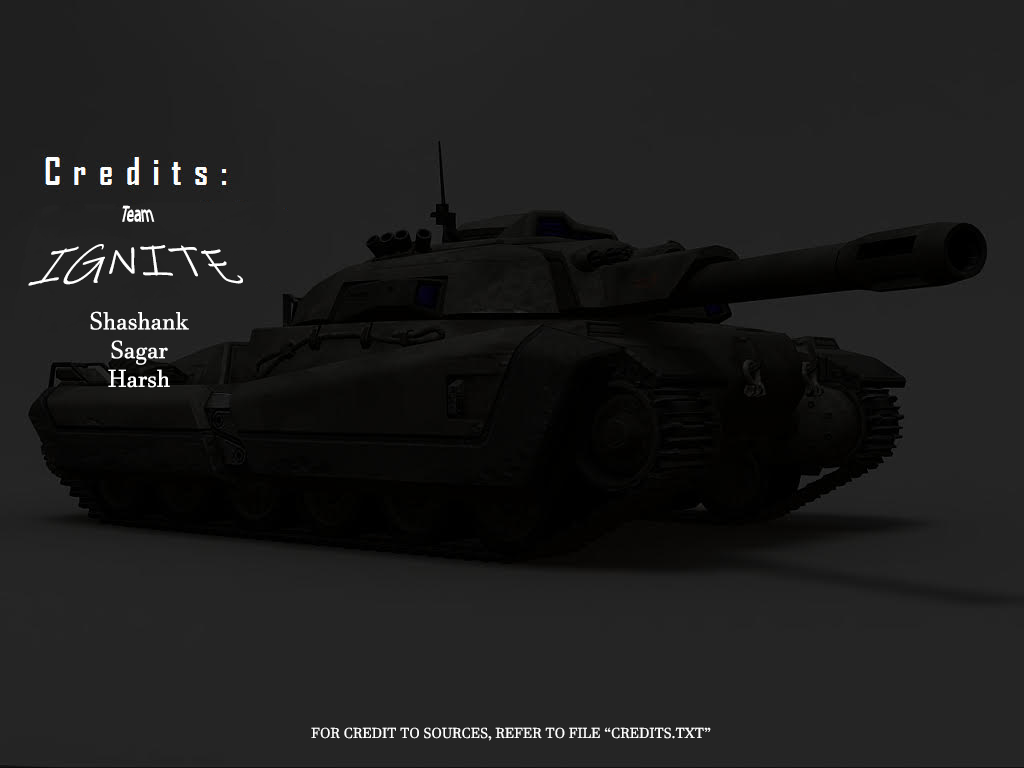
<style>
.page{position:relative;width:1024px;height:768px;background:#252525}
.page>*{position:absolute;margin:0}
.t1{font:57.9px "InkFree";color:#ffffff;scale:0.77 1}
.t2{font:29px "Tahoma";color:#ffffff;scale:0.77 1}
.t3{font:24px "JavaneseText";color:#ffffff}
.t4{font:14px "JavaneseText";color:#ffffff}
</style>
<div class="page">
<p class="t1" style="left:28px;top:205px;width:215px;height:81px;text-align:center"><span class="t2">Team<br></span>IGNITE</p>
<p class="t3" style="left:90px;top:311px;width:99px;height:77px;text-align:center">Shashank<br>Sagar<br>Harsh</p>
<p class="t4" style="left:311px;top:727px;width:400px;height:14px">FOR CREDIT TO SOURCES, REFER TO FILE “CREDITS.TXT”</p>
</div>
